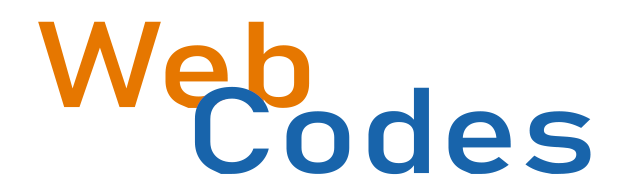
<style>
.page{position:relative;width:625px;height:180px;background:#ffffff}
.page>*{position:absolute;margin:0}
.t1{font:120px "Bahnschrift";color:#1864ab;scale:1.25 1}
</style>
<div class="page">
<p class="t1" style="left:194px;top:86px;width:397px;height:89px">Codes</p>
</div>
